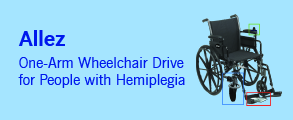
<style>
.page{position:relative;width:293px;height:120px;background:#a5e5ff}
.page>*{position:absolute;margin:0}
.t1{font:20.8px "Roboto-Bold";color:#0018ed}
.t2{font:14.6px "NewsGothicBT-Roman";color:#0018ed}
</style>
<div class="page">
<p class="t1" style="left:18px;top:30px;width:47px;height:16px">Allez</p>
<p class="t2" style="left:18px;top:57px;width:167px;height:31px">One-Arm Wheelchair Drive<br>for People with Hemiplegia</p>
</div>
